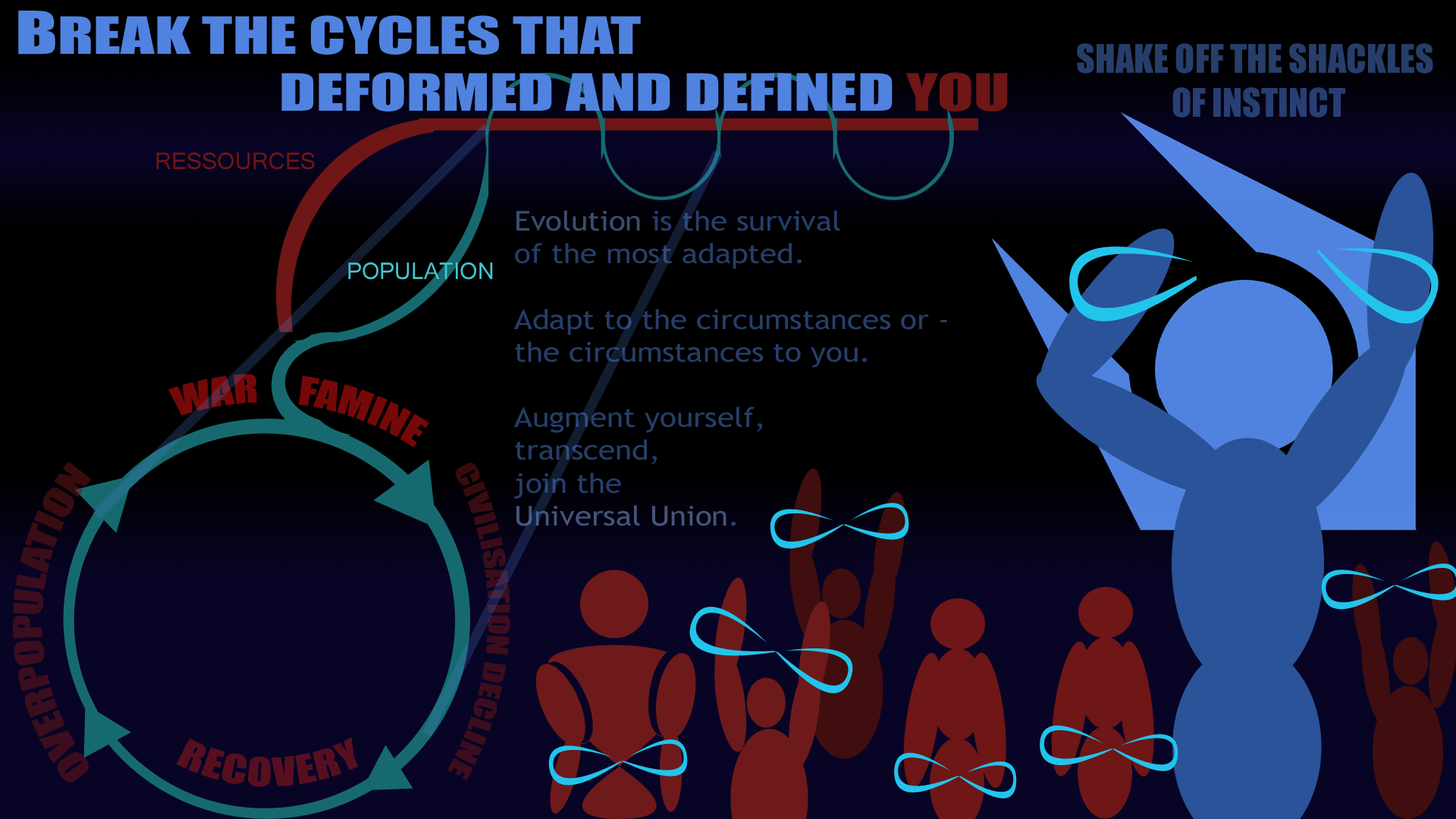
<style>
.page{position:relative;width:1456px;height:819px;background:#000000}
.page>*{position:absolute;margin:0}
.t1{font:47.6px "Impact";color:#5083e0;scale:1.4 1}
.t2{font:54.6px "Impact";color:#5083e0;scale:1.4 1}
.t3{font:47.6px "Impact";color:#6f1616;scale:1.4 1}
.t4{font:36.4px "Impact";color:#263e6a}
.t5{font:36.4px "Kartika";color:#6f1616}
.t6{font:27.3px "TrebuchetMS";color:#263e69;scale:1.12 1}
.t7{font:36.4px "Kartika";color:#3fc7cf}
.t8{font:36.4px "Impact";color:#760808}
.t9{font:36.4px "Impact";color:#3c0d1e}
.t10{font:27.3px "Impact";color:#3c0d1e}
.t11{font:36.4px "Impact";color:#570f20}
</style>
<div class="page">
<p class="t1" style="left:18px;top:11px;width:990px;height:100px"><span class="t2">B</span>REAK THE CYCLES THAT<br>DEFORMED AND DEFINED <span class="t3">YOU</span></p>
<p class="t4" style="left:1077px;top:43px;width:356px;height:75px;text-align:center">SHAKE OFF THE SHACKLES<br> OF INSTINCT</p>
<p class="t5" style="left:156px;top:152px;width:159px;height:18px">RESSOURCES</p>
<p class="t6" style="left:514px;top:210px;width:433px;height:316px">Evolution is the survival <br>of the most adapted.<br><br>Adapt to the circumstances or -<br>the circumstances to you.<br><br>Augment yourself,<br>transcend,<br>join the <br>Universal Union.</p>
<p class="t7" style="left:348px;top:262px;width:145px;height:18px">POPULATION</p>
<p class="t8" style="left:168px;top:374px;width:261px;height:73px;rotate:7deg">WAR     FAMINE</p>
<p class="t9" style="left:13px;top:461px;width:79px;height:322px;text-align:center;rotate:-90deg">OVERPOPULATION<br><br>%%</p>
<p class="t10" style="left:447px;top:463px;width:63px;height:317px;rotate:91deg">CIVILISATION DECLINE</p>
<p class="t11" style="left:176px;top:737px;width:183px;height:50px">RECOVERY</p>
</div>
